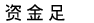
<style>
.page{position:relative;width:94px;height:23px;background:#ffffff}
.page>*{position:absolute;margin:0}
.t1{font:18px "GBLinGothic-Medium";letter-spacing:0.2em;color:#000000}
</style>
<div class="page">
<p class="t1" style="left:5px;top:4px;width:60px;height:17px">资金足</p>
</div>
